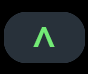
<style>
.page{position:relative;width:88px;height:74px;background:#28313a}
.page>*{position:absolute;margin:0}
.t1{font:50.9px "ArialMT";color:#73ea76}
</style>
<div class="page">
<p class="t1" style="left:33px;top:27px;width:22px;height:20px">^</p>
</div>
